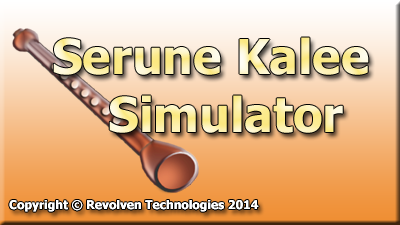
<style>
.page{position:relative;width:400px;height:225px}
.page>*{position:absolute;margin:0}
.t1{font:48px "Tahoma-Bold"}
.t2{font:11.1px "Tahoma-Bold";color:#ffffff}
</style>
<div class="page">
<p class="t1" style="left:53px;top:37px;width:316px;height:96px">Serune Kalee<br>    Simulator</p>
<p class="t2" style="left:9px;top:200px;width:250px;height:12px">Copyright © Revolven Technologies 2014</p>
</div>
